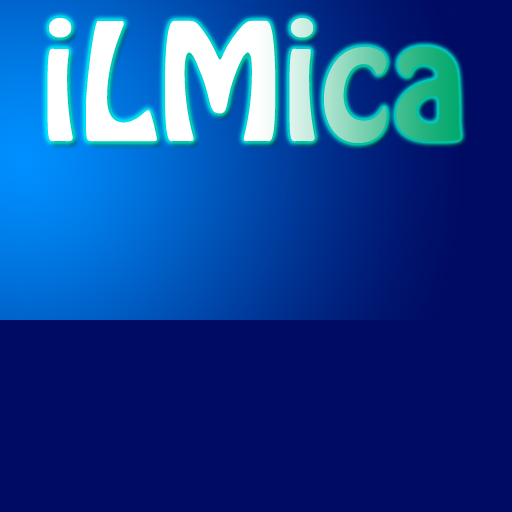
<style>
.page{position:relative;width:512px;height:512px;background:#000c64}
.page>*{position:absolute;margin:0}
.t1{font:144px "HoboStd";color:#ffffff}
</style>
<div class="page">
<p class="t1" style="left:47px;top:18px;width:414px;height:125px">iLMica</p>
</div>
